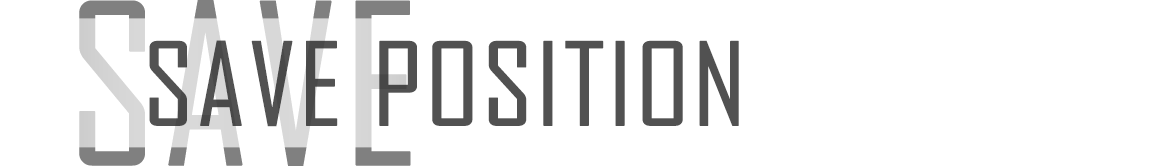
<style>
.page{position:relative;width:1156px;height:166px;background:#ffffff}
.page>*{position:absolute;margin:0}
.t1{font:214px "AgencyFB-Reg";text-transform:uppercase;font-weight:bold}
.t2{font:110px "AgencyFB-Reg";color:#515151;text-transform:uppercase;font-weight:bold;scale:1.1 1}
</style>
<div class="page">
<p class="t1" style="left:79px;top:0px;width:332px;height:167px">save</p>
<p class="t2" style="left:149px;top:40px;width:590px;height:87px">save position</p>
</div>
